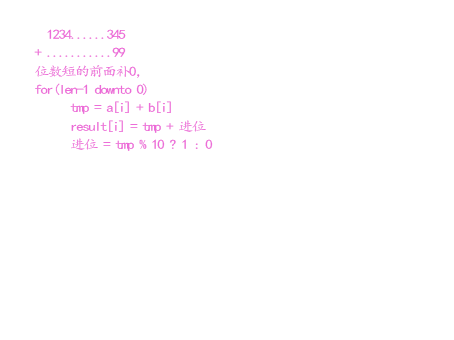
<style>
.page{position:relative;width:454px;height:340px;background:#ffffff}
.page>*{position:absolute;margin:0}
.t1{font:13.3px/14px "¿¬Ìå";letter-spacing:-0.1em;color:#ec6cd8;scale:1.12 1}
</style>
<div class="page">
<p class="t1" style="left:34px;top:29px;width:179px;height:122px">1234......345<br>+ ...........99<br>位数短的前面补0，<br>for(len-1 downto 0)<br> tmp = a[i] + b[i]<br> result[i] = tmp + 进位<br> 进位 = tmp % 10 ? 1 : 0</p>
</div>
